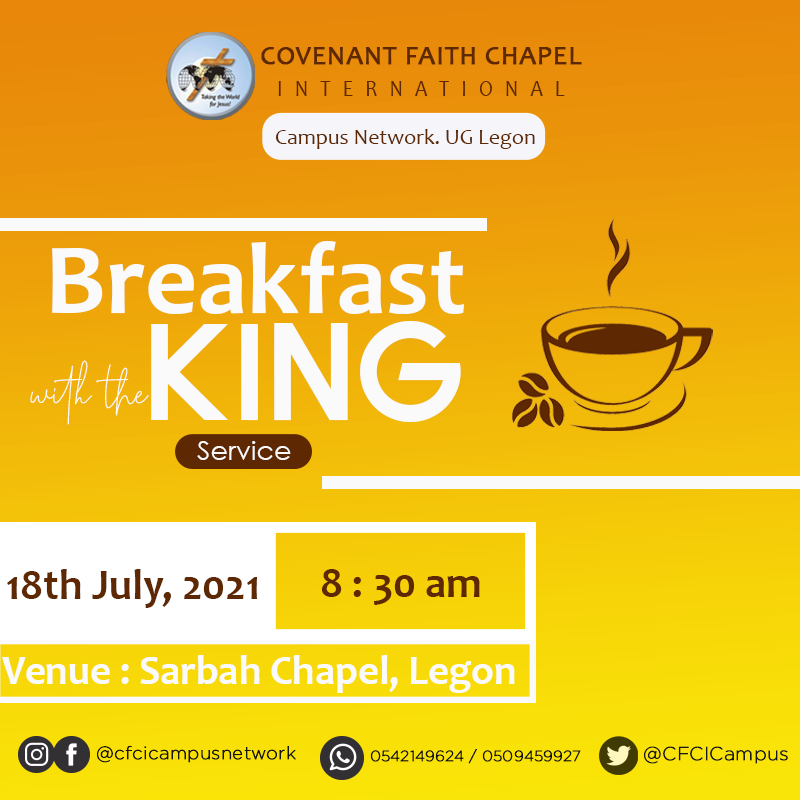
<style>
.page{position:relative;width:800px;height:800px}
.page>*{position:absolute;margin:0}
.t1{font:26.8px "Candara";letter-spacing:0.015em;color:#5e2802;font-weight:bold}
.t2{font:23.9px "Candara";letter-spacing:0.615em;color:#5e2802;scale:0.83 1}
.t3{font:21.8px "Candara";color:#5e2802}
.t4{font:101.9px "Candara-Bold";color:#fafafa}
.t5{font:137.7px "Quantify-Bold";color:#fafafa}
.t6{font:39.2px "MidnightSignature";color:#fafafa}
.t7{font:26.9px "CenturyGothic";color:#fafafa}
.t8{font:43px "Candara-Bold";color:#5e2802}
.t9{font:40.8px "Candara-Bold";color:#fafafa}
.t10{font:17.7px "Gotham-XLight";letter-spacing:0.015em;color:#15150d;font-weight:bold}
.t11{font:14.8px "Gotham-XLight";letter-spacing:0.015em;color:#15150d;font-weight:bold}
.t12{font:18.7px "Gotham-XLight";letter-spacing:0.015em;color:#191917;font-weight:bold}
</style>
<div class="page">
<p class="t1" style="left:261px;top:47px;width:321px;height:49px;text-align:center">COVENANT FAITH CHAPEL<br><span class="t2">INTERNATIONAL</span></p>
<p class="t3" style="left:275px;top:129px;width:260px;height:20px">Campus Network. UG Legon</p>
<p class="t4" style="left:52px;top:241px;width:413px;height:73px">Breakfast</p>
<p class="t5" style="left:151px;top:321px;width:310px;height:101px">KING</p>
<p class="t6" style="left:30px;top:360px;width:119px;height:65px">with the</p>
<p class="t7" style="left:197px;top:441px;width:94px;height:19px">Service</p>
<p class="t8" style="left:7px;top:569px;width:250px;height:39px">18th July, 2021</p>
<p class="t8" style="left:321px;top:569px;width:159px;height:36px">8 : 30 am</p>
<p class="t9" style="left:2px;top:655px;width:513px;height:38px">Venue : Sarbah Chapel, Legon</p>
<p class="t10" style="left:97px;top:745px;width:199px;height:18px">@cfcicampusnetwork</p>
<p class="t11" style="left:370px;top:749px;width:211px;height:15px">0542149624 / 0509459927</p>
<p class="t12" style="left:644px;top:746px;width:144px;height:18px">@CFCICampus</p>
</div>
